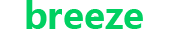
<style>
.page{position:relative;width:170px;height:35px;background:#ffffff}
.page>*{position:absolute;margin:0}
.t1{font:36px "MicrosoftYaHei-Bold";color:#00d061}
</style>
<div class="page">
<p class="t1" style="left:26px;top:0px;width:117px;height:29px">breeze</p>
</div>
